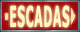
<style>
.page{position:relative;width:80px;height:32px}
.page>*{position:absolute;margin:0}
.t1{font:28.8px "Verdana-Bold";letter-spacing:0.06em;color:#fff7bd;scale:0.38 1}
</style>
<div class="page">
<p class="t1" style="left:10px;top:5px;width:60px;height:23px">ESCADAS</p>
</div>
